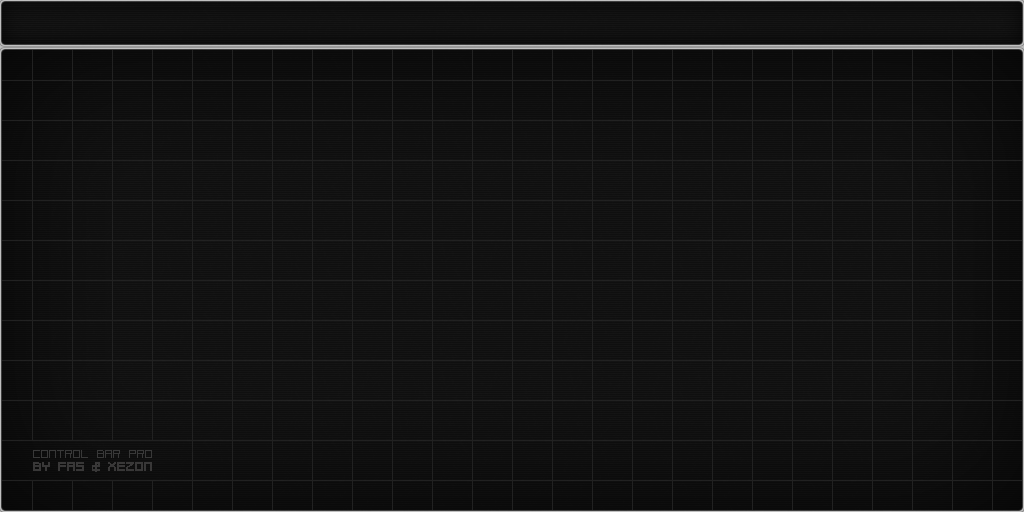
<style>
.page{position:relative;width:1024px;height:512px;background:#0f0f0f}
.page>*{position:absolute;margin:0}
.t1{font:16px "BraciolaMSExtrabold";color:#383737}
</style>
<div class="page">
<p class="t1" style="left:33px;top:462px;width:17px;height:9px">BY</p>
<p class="t1" style="left:58px;top:462px;width:26px;height:9px">FAS</p>
<p class="t1" style="left:92px;top:462px;width:8px;height:10px">&amp;</p>
<p class="t1" style="left:108px;top:462px;width:44px;height:9px">XEZON</p>
</div>
